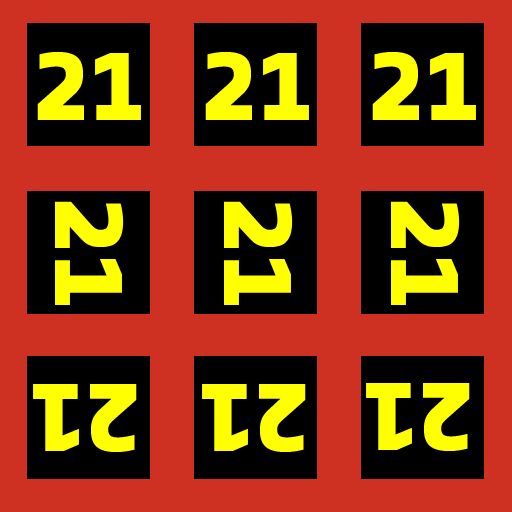
<style>
.page{position:relative;width:512px;height:512px;background:#ce3122}
.page>*{position:absolute;margin:0}
.t1{font:130px "Share-BoldOSF";color:#ffff00}
</style>
<div class="page">
<p class="t1" style="left:37px;top:51px;width:104px;height:69px">21</p>
<p class="t1" style="left:205px;top:51px;width:104px;height:69px">21</p>
<p class="t1" style="left:372px;top:51px;width:104px;height:69px">21</p>
<p class="t1" style="left:55px;top:201px;width:69px;height:104px;rotate:90deg">21</p>
<p class="t1" style="left:224px;top:201px;width:69px;height:104px;rotate:90deg">21</p>
<p class="t1" style="left:391px;top:201px;width:69px;height:104px;rotate:90deg">21</p>
<p class="t1" style="left:33px;top:383px;width:104px;height:70px;rotate:-180deg">21</p>
<p class="t1" style="left:202px;top:383px;width:104px;height:70px;rotate:-180deg">21</p>
<p class="t1" style="left:366px;top:382px;width:104px;height:70px;rotate:-180deg">21</p>
</div>
